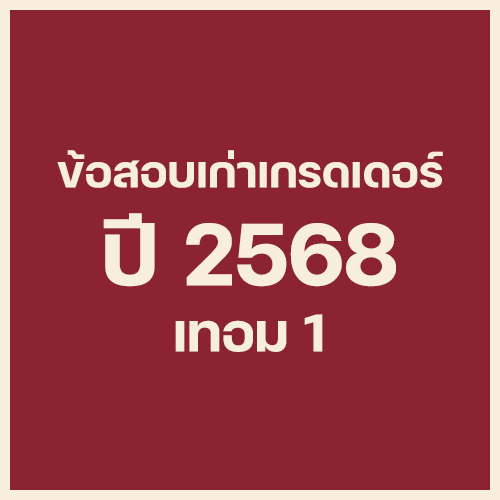
<style>
.page{position:relative;width:500px;height:500px;background:#8b2332}
.page>*{position:absolute;margin:0}
.t1{font:60px "FCMinimalBold";color:#f8eedf}
.t2{font:120px "FCMinimalBold";color:#f8eedf}
.t3{font:72px "FCMinimalBold";color:#f8eedf}
</style>
<div class="page">
<p class="t1" style="left:57px;top:150px;width:386px;height:38px">ข้อสอบเก่าเกรดเดอร์</p>
<p class="t2" style="left:103px;top:213px;width:293px;height:74px">ปี 2568</p>
<p class="t3" style="left:175px;top:314px;width:148px;height:38px">เทอม 1</p>
</div>
